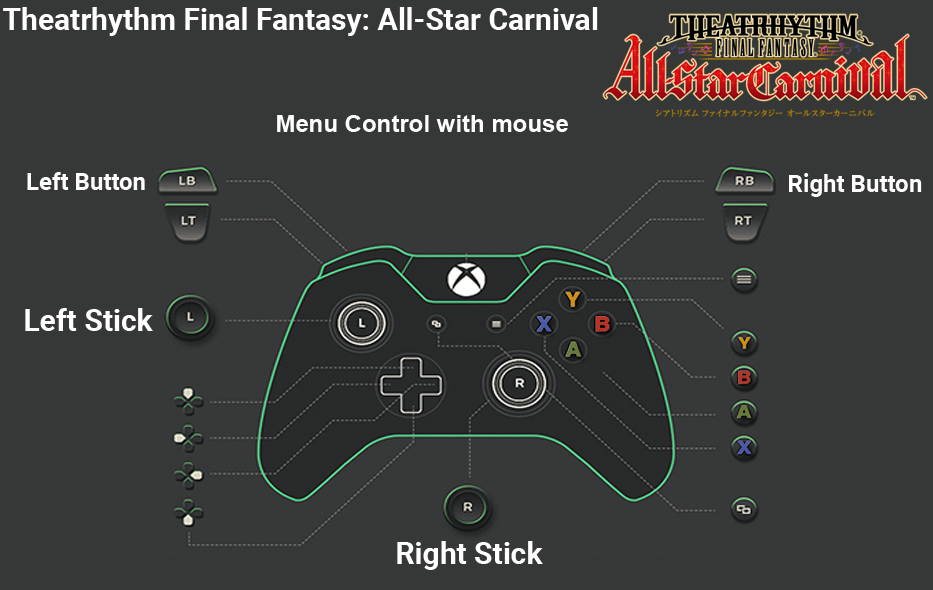
<style>
.page{position:relative;width:933px;height:590px;background:#363838}
.page>*{position:absolute;margin:0}
.t1{font:30px "Roboto-Bold";color:#ffffff}
.t2{font:24px "Arial-BoldMT";color:#fefefe}
.t3{font:24px "Roboto-Bold";color:#ffffff}
</style>
<div class="page">
<p class="t1" style="left:3px;top:7px;width:595px;height:29px">Theatrhythm Final Fantasy: All-Star Carnival</p>
<p class="t2" style="left:277px;top:115px;width:291px;height:17px">Menu Control with mouse</p>
<p class="t3" style="left:27px;top:172px;width:118px;height:18px">Left Button</p>
<p class="t3" style="left:789px;top:173px;width:133px;height:24px">Right Button</p>
<p class="t1" style="left:25px;top:308px;width:128px;height:23px">Left Stick</p>
<p class="t1" style="left:397px;top:541px;width:146px;height:29px">Right Stick</p>
</div>
